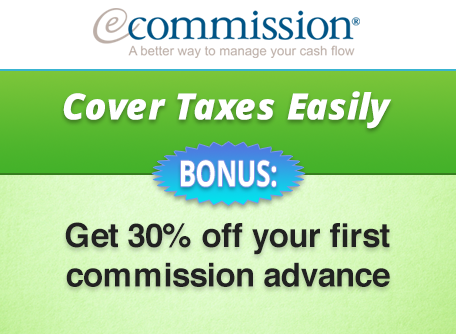
<style>
.page{position:relative;width:456px;height:334px}
.page>*{position:absolute;margin:0}
.t1{font:36.3px "OpenSans-ExtraboldItalic";color:#ffffff}
.t2{font:35.8px "OpenSans-Bold";color:#ffffff;scale:0.72 1}
.t3{font:33px "Helvetica-Bold";color:#212121}
</style>
<div class="page">
<p class="t1" style="left:63px;top:91px;width:329px;height:38px">Cover Taxes Easily</p>
<p class="t2" style="left:181px;top:160px;width:95px;height:27px">BONUS:</p>
<p class="t3" style="left:65px;top:222px;width:325px;height:65px;text-align:center">Get 30% off your first<br>commission advance</p>
</div>
